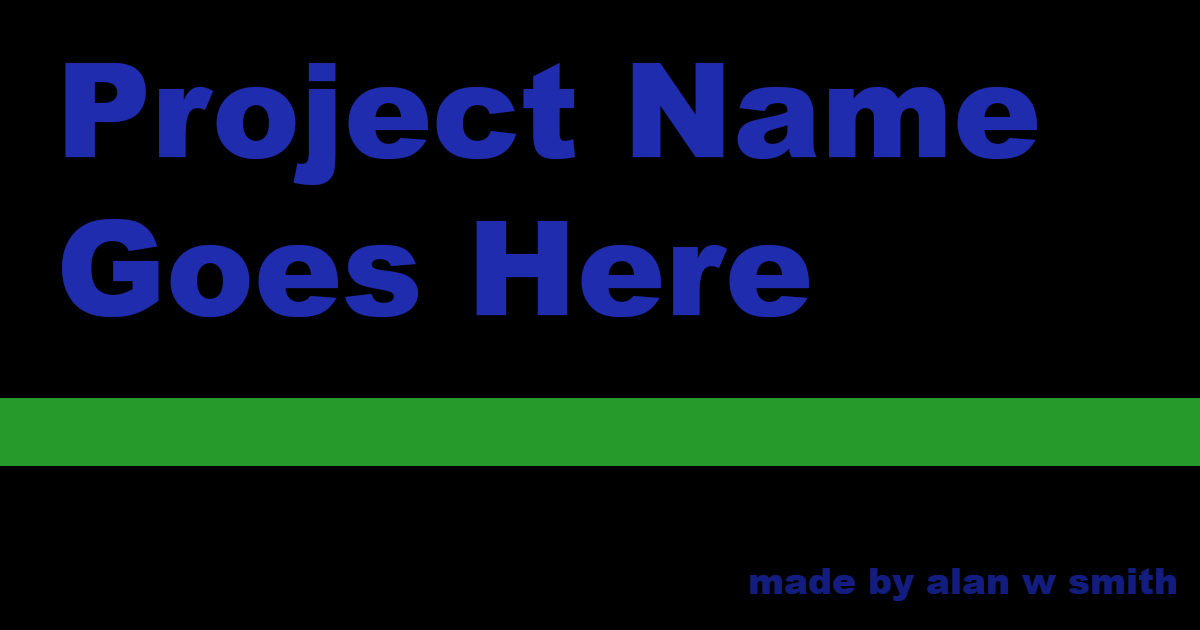
<style>
.page{position:relative;width:1200px;height:630px;background:#000000}
.page>*{position:absolute;margin:0}
.t1{font:132px "Arial-Black";color:#1f2cad}
.t2{font:36px "Arial-Black";color:#131d80}
</style>
<div class="page">
<p class="t1" style="left:62px;top:63px;width:975px;height:254px">Project Name <br>Goes Here</p>
<p class="t2" style="left:750px;top:568px;width:426px;height:33px">made by alan w smith</p>
</div>
